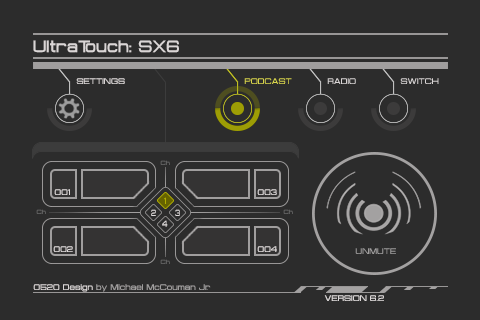
<style>
.page{position:relative;width:480px;height:320px;background:#2c2c2c}
.page>*{position:absolute;margin:0}
.t1{font:16px "Probert-Bold";color:#dad6d6}
.t2{font:8px "Probert-Bold";color:#dad6d6}
.t3{font:6px "Probert-Bold";color:#696969}
.t4{font:8px "Probert-Bold";color:#dedada}
.t5{font:8.7px "Probert-Bold";color:#dedada;scale:0.74 1}
.t6{font:8px "Probert-Bold";color:#a09e9e}
</style>
<div class="page">
<p class="t1" style="left:33px;top:40px;width:146px;height:13px">UltraTouch: SX6</p>
<p class="t2" style="left:76px;top:78px;width:49px;height:6px">SETTINGS</p>
<p class="t3" style="left:160px;top:160px;width:10px;height:5px">Ch</p>
<p class="t4" style="left:54px;top:189px;width:16px;height:6px">001</p>
<p class="t4" style="left:257px;top:189px;width:20px;height:6px">003</p>
<p class="t3" style="left:36px;top:209px;width:10px;height:5px">Ch</p>
<p class="t5" style="left:151px;top:209px;width:5px;height:7px">2</p>
<p class="t5" style="left:175px;top:209px;width:5px;height:7px">3</p>
<p class="t3" style="left:283px;top:209px;width:10px;height:5px">Ch</p>
<p class="t5" style="left:162px;top:220px;width:6px;height:7px">4</p>
<p class="t4" style="left:53px;top:246px;width:20px;height:6px">002</p>
<p class="t4" style="left:257px;top:246px;width:20px;height:6px">004</p>
<p class="t3" style="left:160px;top:259px;width:10px;height:5px">Ch</p>
<p class="t6" style="left:33px;top:284px;width:178px;height:8px"><span class="t2">0520 Design</span> by Michael McCouman Jr.</p>
<p class="t4" style="left:324px;top:295px;width:60px;height:6px">VERSION 6.2</p>
</div>
